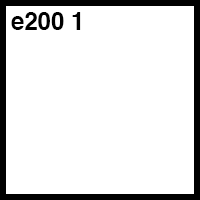
<style>
.page{position:relative;width:200px;height:200px;background:#ffffff}
.page>*{position:absolute;margin:0}
.t1{font:24px "Helvetica-Bold";color:#000000}
</style>
<div class="page">
<p class="t1" style="left:11px;top:12px;width:70px;height:18px">e200 1</p>
</div>
